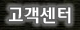
<style>
.page{position:relative;width:80px;height:30px}
.page>*{position:absolute;margin:0}
.t1{font:19px "2002L";color:#ffffff}
</style>
<div class="page">
<p class="t1" style="left:8px;top:7px;width:63px;height:17px">고객센터</p>
</div>
